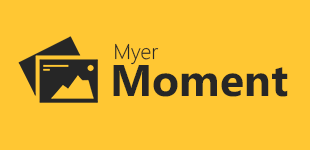
<style>
.page{position:relative;width:310px;height:150px;background:#ffc733}
.page>*{position:absolute;margin:0}
.t1{font:21.2px "SegoeWP-Light";color:#262626}
.t2{font:44.4px "SegoeWP-Bold";color:#262626}
</style>
<div class="page">
<p class="t1" style="left:115px;top:43px;width:44px;height:22px">Myer</p>
<p class="t2" style="left:113px;top:65px;width:175px;height:32px">Moment</p>
</div>
